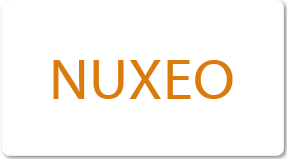
<style>
.page{position:relative;width:287px;height:159px;background:#ffffff}
.page>*{position:absolute;margin:0}
.t1{font:58.1px "Myriad-Web";letter-spacing:0.005em;color:#da7b0b}
</style>
<div class="page">
<p class="t1" style="left:53px;top:60px;width:180px;height:39px">NUXEO</p>
</div>
